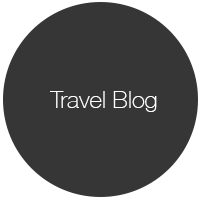
<style>
.page{position:relative;width:200px;height:200px;background:#363636}
.page>*{position:absolute;margin:0}
.t1{font:24px "HelveticaNeue-Thin";color:#ffffff}
</style>
<div class="page">
<p class="t1" style="left:50px;top:91px;width:107px;height:21px">Travel Blog</p>
</div>
